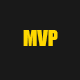
<style>
.page{position:relative;width:80px;height:80px;background:#191919}
.page>*{position:absolute;margin:0}
.t1{font:20px "Impact";color:#ffd800}
</style>
<div class="page">
<p class="t1" style="left:23px;top:30px;width:35px;height:16px">MVP</p>
</div>
